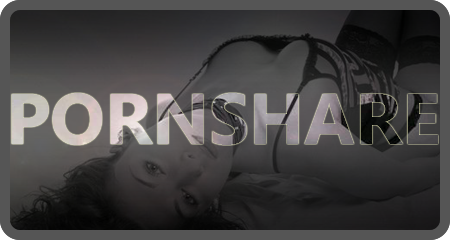
<style>
.page{position:relative;width:450px;height:240px}
.page>*{position:absolute;margin:0}
.t1{font:72px "KhmerUI-Bold"}
</style>
<div class="page">
<p class="t1" style="left:11px;top:93px;width:427px;height:52px">PORNSHARE</p>
</div>
